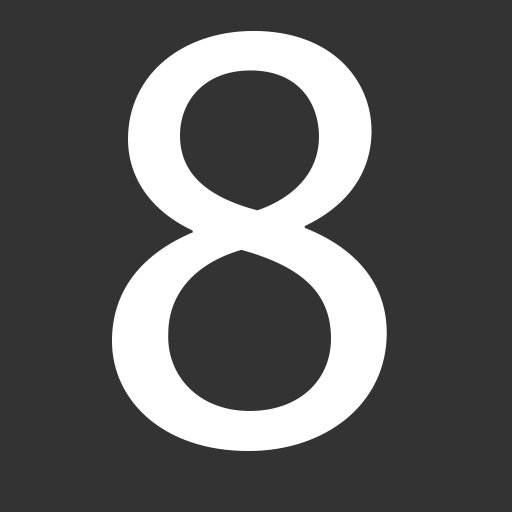
<style>
.page{position:relative;width:512px;height:512px;background:#333333}
.page>*{position:absolute;margin:0}
.t1{font:625px "MyriadPro-Regular";color:#ffffff}
</style>
<div class="page">
<p class="t1" style="left:112px;top:30px;width:275px;height:421px">8</p>
</div>
